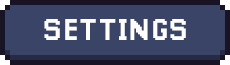
<style>
.page{position:relative;width:230px;height:65px;background:#3a4466}
.page>*{position:absolute;margin:0}
.t1{font:30.6px "Pixellari";color:#ffffff}
</style>
<div class="page">
<p class="t1" style="left:44px;top:19px;width:142px;height:21px">SETTINGS</p>
</div>
